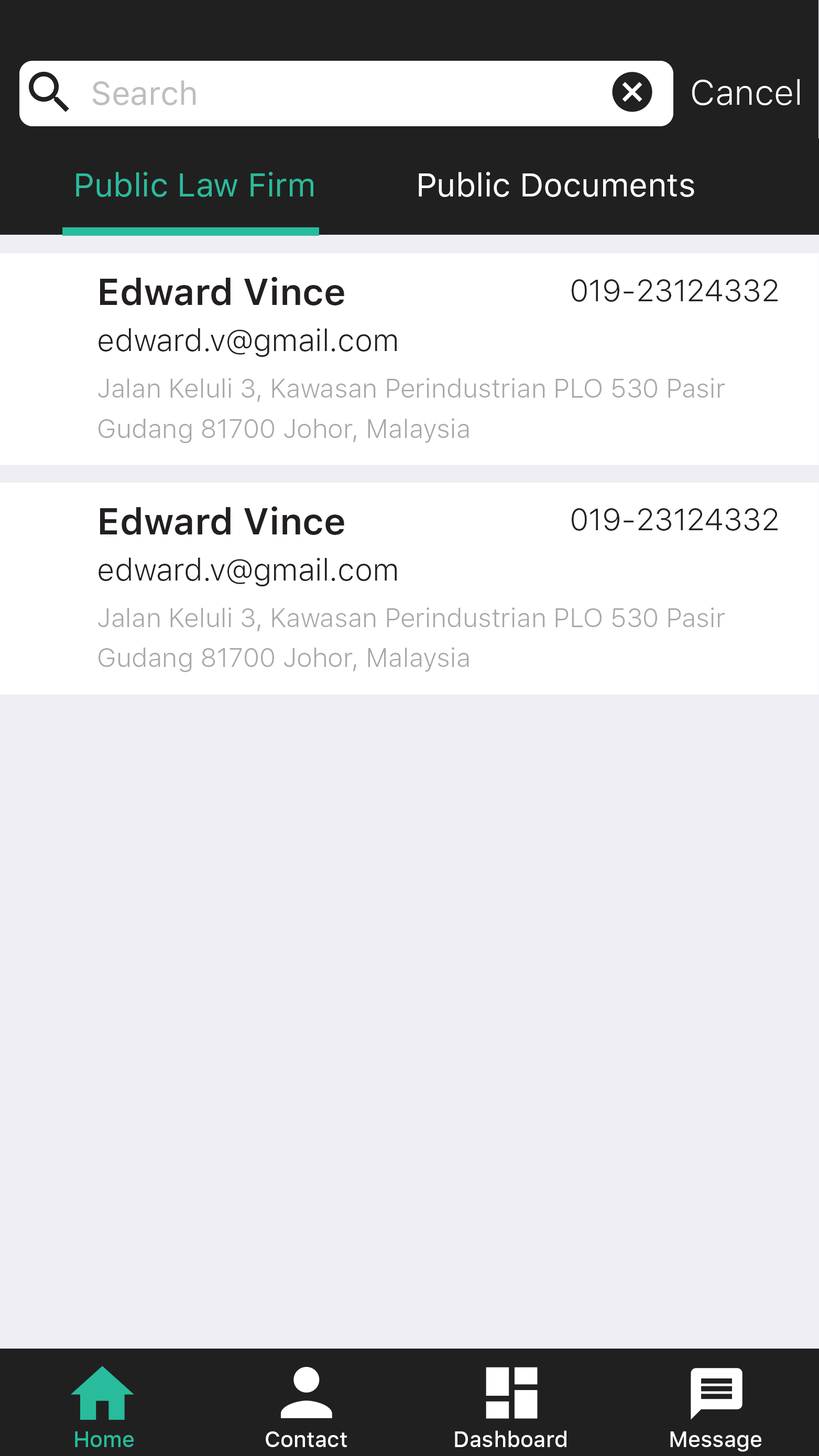
<style>
.page{position:relative;width:819px;height:1456px;background:#efeef5}
.page>*{position:absolute;margin:0}
.t1{font:32.7px "SFUIText-Regular";color:#bcbec0}
.t2{font:34.9px "SFUIText-Light";color:#ffffff}
.t3{font:32.7px "SFUIText-Regular";color:#2bba9c}
.t4{font:32.7px "SFUIText-Regular";color:#ffffff}
.t5{font:37.1px "SFUIText-Semibold";color:#231f20}
.t6{font:30.6px "SFUIText-Light";color:#212121}
.t7{font:26.2px/40.2px "SFUIText-Light";color:#a7a9ac}
.t8{font:21.8px "SFUIText-Medium";color:#28bc9c}
.t9{font:21.8px "SFUIText-Medium";color:#ffffff}
</style>
<div class="page">
<p class="t1" style="left:92px;top:80px;width:104px;height:25px">Search</p>
<p class="t2" style="left:692px;top:79px;width:108px;height:26px">Cancel</p>
<p class="t3" style="left:76px;top:172px;width:237px;height:25px">Public Law Firm</p>
<p class="t4" style="left:419px;top:172px;width:275px;height:25px">Public Documents</p>
<p class="t5" style="left:100px;top:277px;width:244px;height:28px">Edward Vince</p>
<p class="t6" style="left:572px;top:279px;width:206px;height:23px">019-23124332</p>
<p class="t6" style="left:99px;top:328px;width:298px;height:29px">edward.v@gmail.com</p>
<p class="t7" style="left:98px;top:378px;width:627px;height:65px">Jalan Keluli 3, Kawasan Perindustrian PLO 530 Pasir <br>Gudang 81700 Johor, Malaysia</p>
<p class="t5" style="left:100px;top:506px;width:244px;height:29px">Edward Vince</p>
<p class="t6" style="left:572px;top:508px;width:206px;height:23px">019-23124332</p>
<p class="t6" style="left:99px;top:557px;width:298px;height:30px">edward.v@gmail.com</p>
<p class="t7" style="left:98px;top:607px;width:627px;height:65px">Jalan Keluli 3, Kawasan Perindustrian PLO 530 Pasir <br>Gudang 81700 Johor, Malaysia</p>
<p class="t8" style="left:74px;top:1431px;width:59px;height:16px">Home</p>
<p class="t8" style="left:75px;top:1431px;width:59px;height:16px">Home</p>
<p class="t9" style="left:266px;top:1431px;width:81px;height:16px">Contact</p>
<p class="t9" style="left:455px;top:1430px;width:111px;height:17px">Dashboard</p>
<p class="t9" style="left:670px;top:1431px;width:91px;height:21px">Message</p>
</div>
